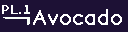
<style>
.page{position:relative;width:128px;height:32px;background:#1d1135}
.page>*{position:absolute;margin:0}
.t1{font:12px "BonvenoCF-Light";letter-spacing:0.005em;color:#ffffff;font-weight:bold}
.t2{font:18px "BonvenoCF-Light";letter-spacing:0.005em;color:#ffffff;font-weight:bold}
</style>
<div class="page">
<p class="t1" style="left:2px;top:5px;width:19px;height:9px">PL.</p>
<p class="t2" style="left:33px;top:9px;width:89px;height:16px">Avocado</p>
</div>
